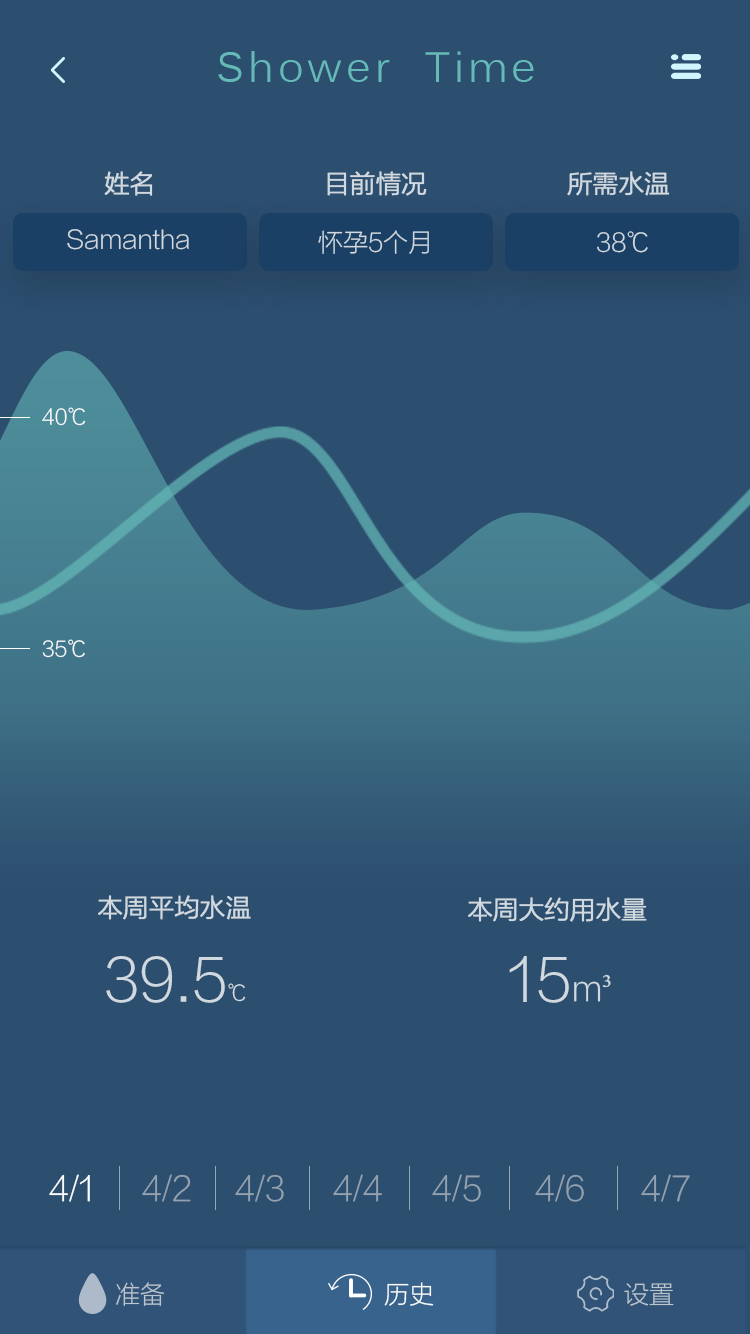
<style>
.page{position:relative;width:750px;height:1334px;background:#2c4e6f}
.page>*{position:absolute;margin:0}
.t1{font:41.7px "Kalinga";letter-spacing:0.1em;color:#65bab8}
.t2{font:25px "FZLTXHJW--GB1-0";color:#d0d9e0;font-weight:bold}
.t3{font:25px "FZLTXHJW--GB1-0";color:#d0d9e0}
.t4{font:20.8px "FZLTXHJW--GB1-0";color:#f9fcfc}
.t5{font:58.3px "FZLTXHJW--GB1-0";color:#d0d9e0}
.t6{font:20.8px "FZLTXHJW--GB1-0";color:#d0d9e0}
.t7{font:33.3px "FZLTXHJW--GB1-0";color:#d0d9e0}
.t8{font:33.3px "SimSun";color:#d0d9e0}
.t9{font:33.3px "FZLTXHJW--GB1-0";color:#f9fcfc}
.t10{font:33.3px "FZLTXHJW--GB1-0";color:#94a2b0}
.t11{font:25px "FZLTXHJW--GB1-0";color:#bac4cd}
.t12{font:25px "FZLTXHJW--GB1-0";color:#f9fcfc}
</style>
<div class="page">
<p class="t1" style="left:218px;top:51px;width:316px;height:31px">Shower  Time</p>
<p class="t2" style="left:104px;top:171px;width:49px;height:25px">姓名</p>
<p class="t2" style="left:327px;top:171px;width:100px;height:25px">目前情况</p>
<p class="t2" style="left:567px;top:171px;width:103px;height:25px">所需水温</p>
<p class="t3" style="left:67px;top:229px;width:122px;height:21px">Samantha</p>
<p class="t3" style="left:318px;top:230px;width:111px;height:24px">怀孕5个月</p>
<p class="t3" style="left:597px;top:231px;width:51px;height:22px">38℃</p>
<p class="t4" style="left:42px;top:407px;width:44px;height:19px">40℃</p>
<p class="t4" style="left:42px;top:639px;width:43px;height:19px">35℃</p>
<p class="t2" style="left:98px;top:895px;width:153px;height:25px">本周平均水温</p>
<p class="t2" style="left:468px;top:897px;width:179px;height:25px">本周大约用水量</p>
<p class="t5" style="left:106px;top:956px;width:140px;height:47px">39.5<span class="t6">℃</span></p>
<p class="t5" style="left:509px;top:956px;width:102px;height:47px">15<span class="t7">m</span><span class="t8">³</span></p>
<p class="t9" style="left:49px;top:1174px;width:41px;height:28px">4/1</p>
<p class="t10" style="left:142px;top:1174px;width:49px;height:28px">4/2</p>
<p class="t10" style="left:235px;top:1174px;width:49px;height:28px">4/3</p>
<p class="t10" style="left:333px;top:1174px;width:49px;height:28px">4/4</p>
<p class="t10" style="left:432px;top:1174px;width:49px;height:28px">4/5</p>
<p class="t10" style="left:535px;top:1174px;width:49px;height:28px">4/6</p>
<p class="t10" style="left:641px;top:1174px;width:49px;height:28px">4/7</p>
<p class="t11" style="left:116px;top:1282px;width:49px;height:24px">准备</p>
<p class="t12" style="left:384px;top:1282px;width:50px;height:24px">历史</p>
<p class="t11" style="left:624px;top:1283px;width:50px;height:23px">设置</p>
</div>
